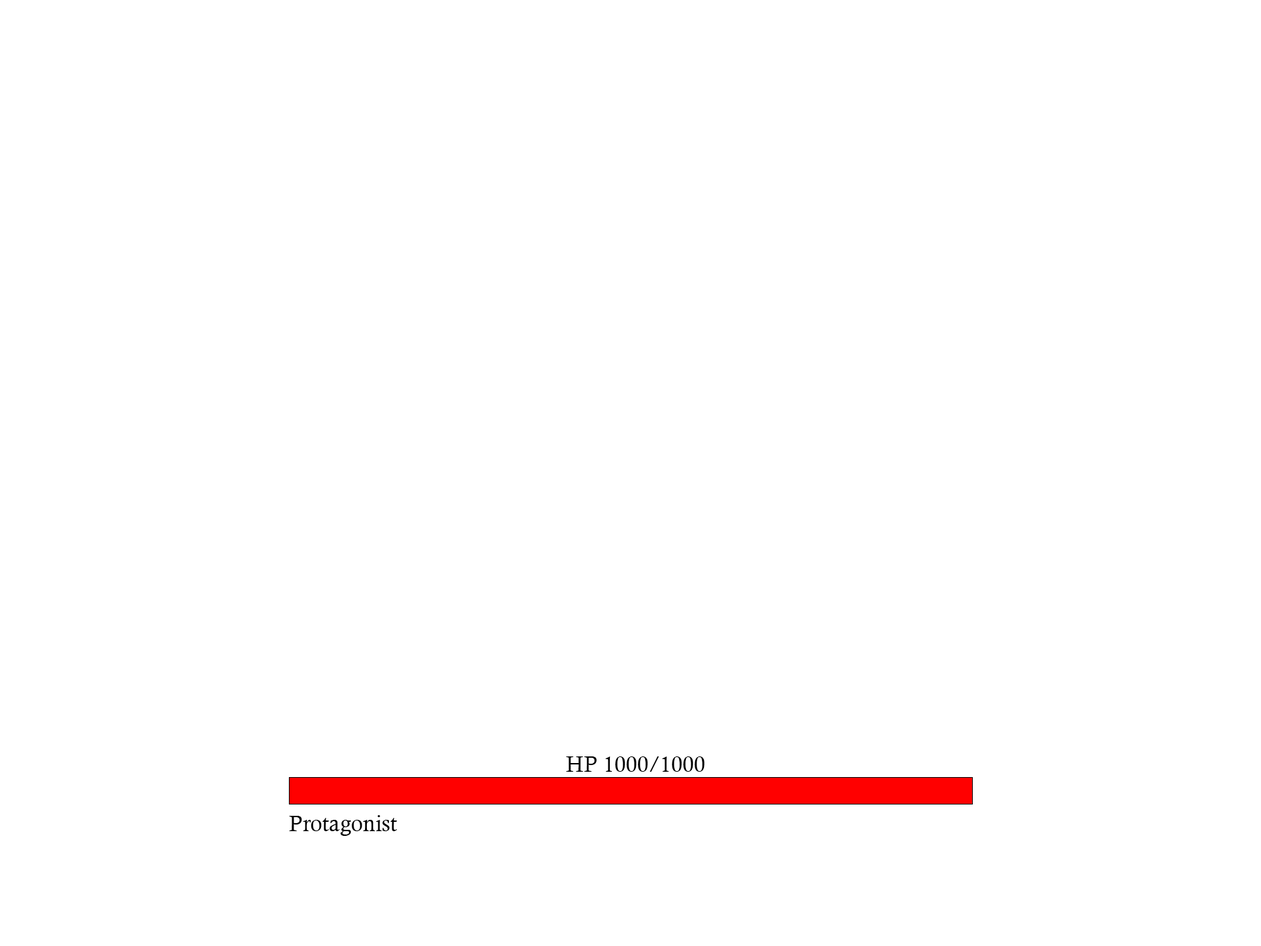
<style>
.page{position:relative;width:1261px;height:946px;background:#ffffff}
.page>*{position:absolute;margin:0}
.t1{font:22.2px "CalistoMT";color:#000000}
</style>
<div class="page">
<p class="t1" style="left:566px;top:756px;width:139px;height:15px">HP 1000/1000</p>
</div>
